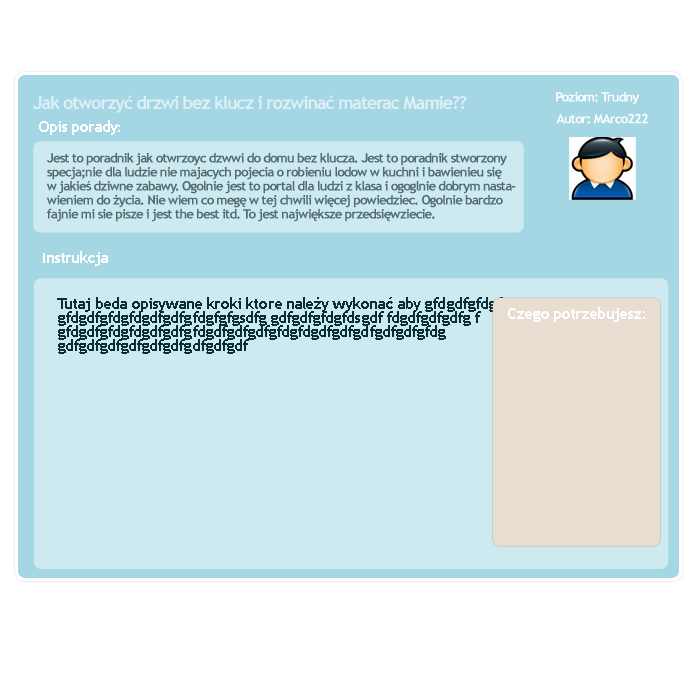
<style>
.page{position:relative;width:700px;height:700px;background:#cdeaf1}
.page>*{position:absolute;margin:0}
.t1{font:18px "TrebuchetMS-Bold";letter-spacing:-0.06em;color:#dcf0f5}
.t2{font:13px "TrebuchetMS-Bold";letter-spacing:-0.06em;color:#ffffff}
.t3{font:16px "TrebuchetMS-Bold";letter-spacing:-0.06em;color:#ffffff}
.t4{font:13px/14px "TrebuchetMS-Bold";letter-spacing:-0.06em;color:#526c72}
.t5{font:16px/14px "TrebuchetMS-Bold";letter-spacing:-0.06em;color:#092e37}
</style>
<div class="page">
<p class="t1" style="left:33px;top:95px;width:434px;height:18px">Jak otworzyć drzwi bez klucz i rozwinać materac Mamie??</p>
<p class="t2" style="left:556px;top:91px;width:84px;height:14px">Poziom: Trudny</p>
<p class="t2" style="left:556px;top:113px;width:92px;height:11px">Autor: MArco222</p>
<p class="t3" style="left:39px;top:120px;width:81px;height:15px">Opis porady<span class="t2">:</span></p>
<p class="t4" style="left:46px;top:152px;width:470px;height:70px">Jest to poradnik jak otwrzoyc dzwwi do domu bez klucza. Jest to poradnik stworzony <br>specja;nie dla ludzie nie majacych pojecia o robieniu lodow w kuchni i bawienieu się<br>w jakieś dziwne zabawy. Ogolnie jest to portal dla ludzi z klasa i ogoglnie dobrym nasta-<br>wieniem do życia. Nie wiem co megę w tej chwili więcej powiedziec. Ogolnie bardzo <br>fajnie mi sie pisze i jest the best itd. To jest największe przedsięwziecie.</p>
<p class="t3" style="left:43px;top:251px;width:65px;height:15px"><span class="t2">I</span>nstrukcja</p>
<p class="t5" style="left:57px;top:297px;width:446px;height:57px">Tutaj beda opisywane kroki ktore należy wykonać aby gfdgdfgfdgf<br>gfdgdfgfdgfdgdfgdfgfdgfgfgsdfg gdfgdfgfdgfdsgdf fdgdfgdfgdfg f<br>gfdgdfgfdgfdgdfgdfgfdgdfgdfgdfgfdgfdgdfgdfgdfgdfgdfgfdg<br>gdfgdfgdfgdfgdfgdfgdfgdfgdf</p>
<p class="t3" style="left:508px;top:307px;width:137px;height:15px">Czego potrzebujesz:</p>
</div>
